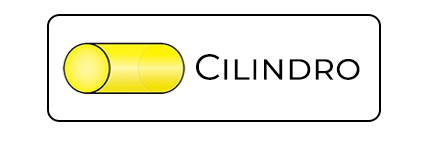
<style>
.page{position:relative;width:426px;height:141px;background:#ffffff}
.page>*{position:absolute;margin:0}
.t1{font:36px "Montserrat-Regular";color:#000000;font-variant:small-caps;scale:1.03 1}
</style>
<div class="page">
<p class="t1" style="left:196px;top:54px;width:164px;height:26px">Cilindro</p>
</div>
